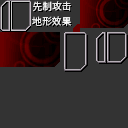
<style>
.page{position:relative;width:128px;height:128px;background:#333333}
.page>*{position:absolute;margin:0}
.t1{font:10px/15px "SourceHanSansSC-Regular";color:#e8e8e8}
</style>
<div class="page">
<p class="t1" style="left:32px;top:1px;width:40px;height:25px">先制攻击<br>地形效果</p>
</div>
